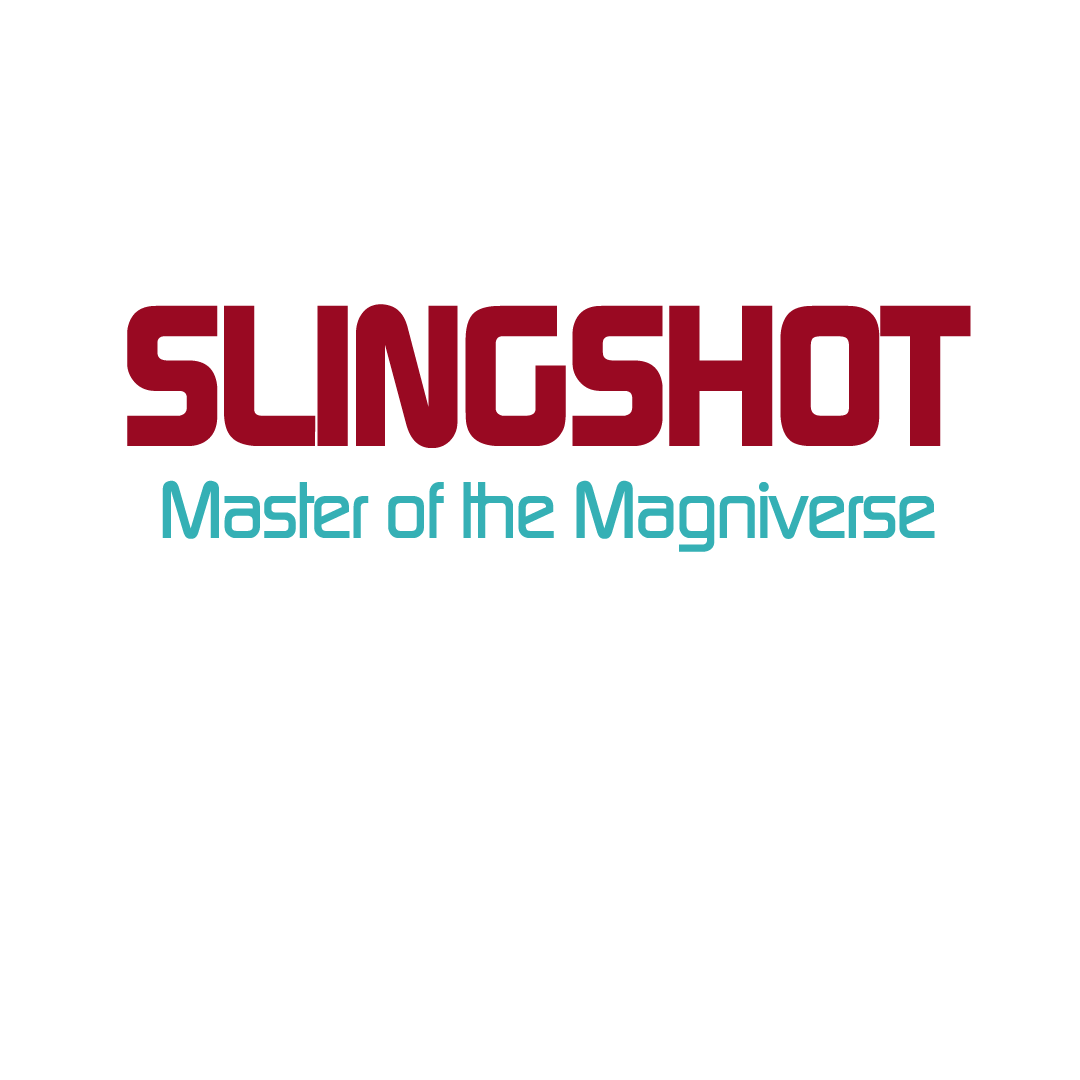
<style>
.page{position:relative;width:1080px;height:1080px;background:#ffffff}
.page>*{position:absolute;margin:0}
.t1{font:200px "ContinuumBold";letter-spacing:-0.05em;color:#990922}
.t2{font:80px "ContinuumMedium";letter-spacing:-0.05em;color:#35b0b5}
</style>
<div class="page">
<p class="t1" style="left:127px;top:304px;width:844px;height:144px">SLINGSHOT</p>
<p class="t2" style="left:162px;top:480px;width:773px;height:72px">Master of the Magniverse</p>
</div>
